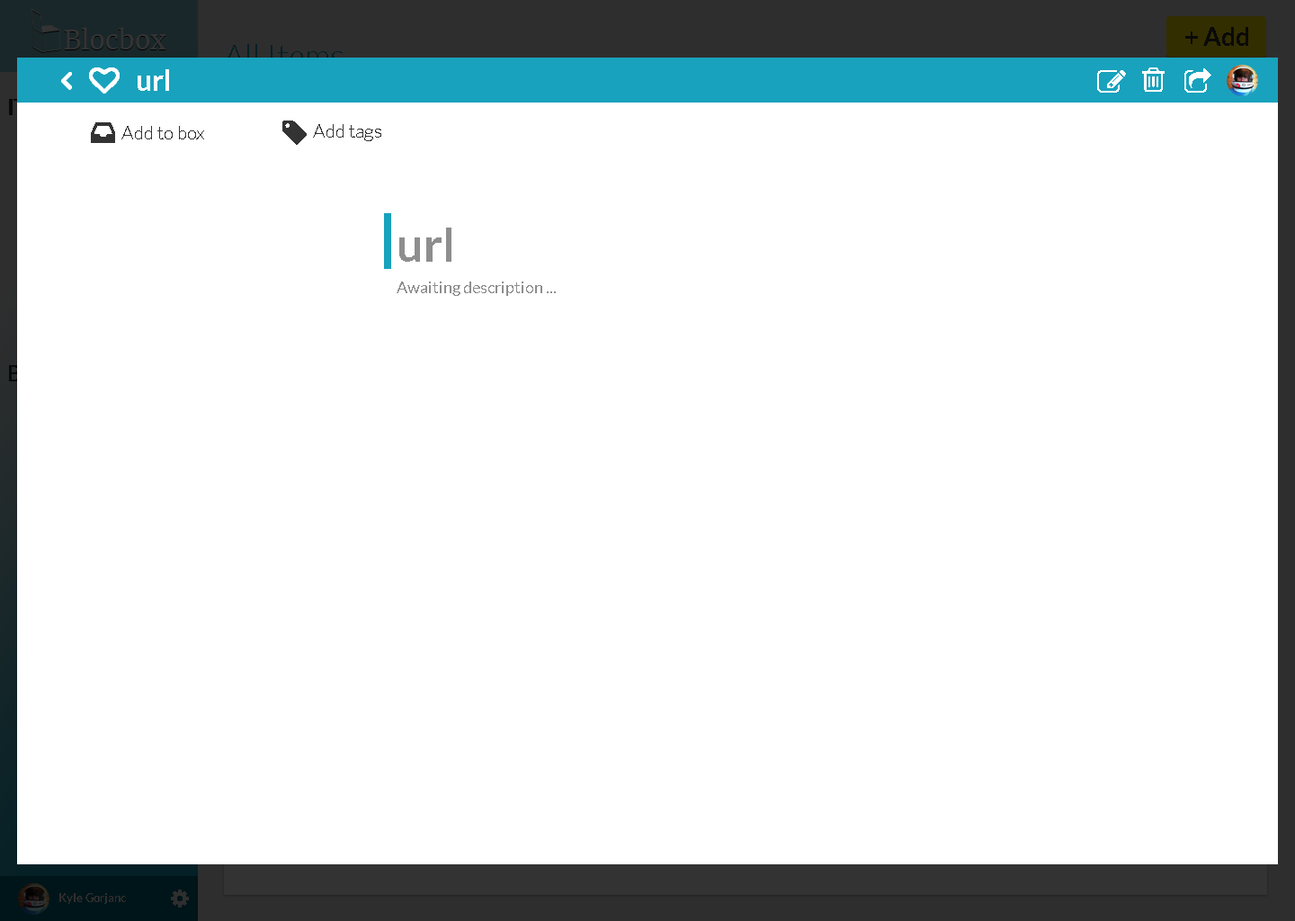
<style>
.page{position:relative;width:1295px;height:921px;background:#ffffff}
.page>*{position:absolute;margin:0}
.t1{font:25.6px "Lato-Bold";color:#0a0a0a}
.t2{font:32.4px "Lato-Light"}
.t3{font:28.8px "Lato-Bold";color:#ffffff}
.t4{font:19.2px "Lato-Light";color:#333333}
.t5{font:46.8px "Lato-Bold";color:#8e8e8e}
.t6{font:16.2px "Lato-Regular";color:#8e8e8e}
.t7{font:11.7px "Lato-Bold";color:#2e2e2e}
</style>
<div class="page">
<p class="t1" style="left:1185px;top:27px;width:63px;height:19px">+ Add</p>
<p class="t2" style="left:224px;top:44px;width:119px;height:23px">All Items</p>
<p class="t3" style="left:138px;top:69px;width:31px;height:22px">url</p>
<p class="t4" style="left:121px;top:126px;width:83px;height:13px">Add to box</p>
<p class="t4" style="left:313px;top:124px;width:68px;height:17px">Add tags</p>
<p class="t5" style="left:399px;top:228px;width:52px;height:34px">url</p>
<p class="t6" style="left:397px;top:281px;width:159px;height:15px">Awaiting description ...</p>
<p class="t7" style="left:59px;top:893px;width:67px;height:11px">Kyle Gorjanc</p>
</div>
